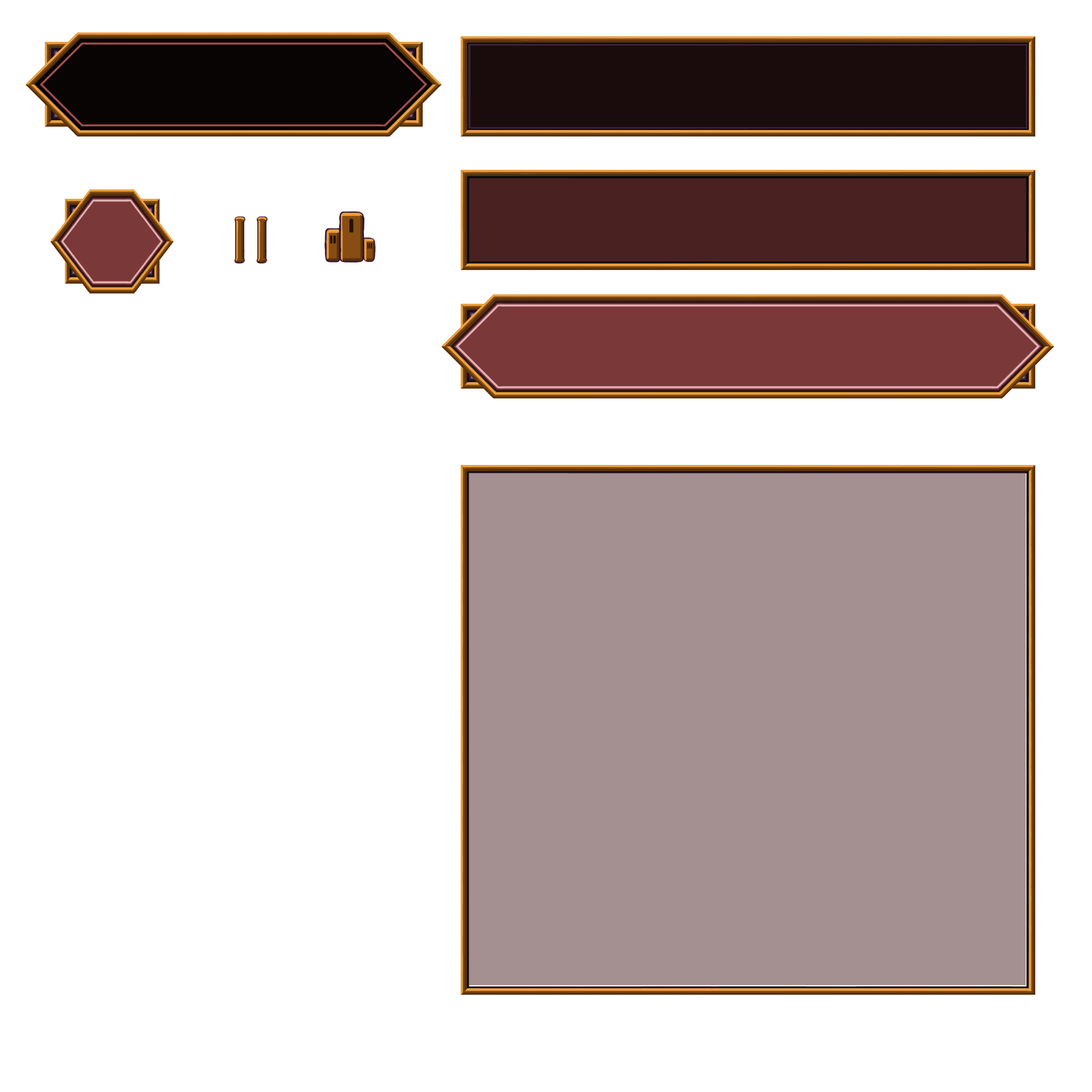
<style>
.page{position:relative;width:1092px;height:1092px;background:#ffffff}
.page>*{position:absolute;margin:0}
.t1{font:20.5px "Bauhaus93";color:#241200}
.t2{font:12px "Bauhaus93";letter-spacing:-0.28em;color:#241200}
.t3{font:8.9px "Bauhaus93";letter-spacing:-0.28em;color:#241200;scale:0.69 1}
</style>
<div class="page">
<p class="t1" style="left:349px;top:219px;width:5px;height:13px">1</p>
<p class="t2" style="left:330px;top:235px;width:6px;height:9px">11</p>
<p class="t3" style="left:367px;top:243px;width:5px;height:6px">111</p>
</div>
